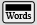
<style>
.page{position:relative;width:37px;height:25px;background:#f0f0f0}
.page>*{position:absolute;margin:0}
.t1{font:10px "TimesNewRomanPSMT";color:#000000}
.t2{font:10px "TimesNewRomanPSMT";color:#ffffff}
</style>
<div class="page">
<p class="t1" style="left:5px;top:12px;width:27px;height:7px">Words<span class="t2">sing</span></p>
</div>
